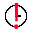
<style>
.page{position:relative;width:32px;height:32px;background:#ffffff}
.page>*{position:absolute;margin:0}
.t1{font:37.5px "MyriadPro-Regular";color:#ff022c}
</style>
<div class="page">
<p class="t1" style="left:14px;top:3px;width:5px;height:26px">!</p>
</div>
